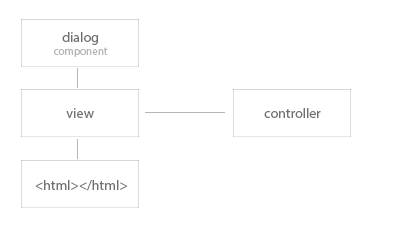
<style>
.page{position:relative;width:400px;height:225px;background:#ffffff}
.page>*{position:absolute;margin:0}
.t1{font:14px "MyriadPro-Regular";color:#707070}
.t2{font:11px "MyriadPro-Regular";color:#b6b6b6}
</style>
<div class="page">
<p class="t1" style="left:62px;top:32px;width:36px;height:13px">dialog</p>
<p class="t2" style="left:54px;top:47px;width:54px;height:10px">component</p>
<p class="t1" style="left:66px;top:108px;width:28px;height:10px">view</p>
<p class="t1" style="left:264px;top:108px;width:57px;height:10px">controller</p>
<p class="t1" style="left:35px;top:180px;width:92px;height:11px">&lt;html&gt;&lt;/html&gt;</p>
</div>
